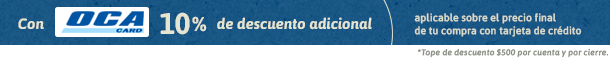
<style>
.page{position:relative;width:610px;height:60px;background:#ffffff}
.page>*{position:absolute;margin:0}
.t1{font:30px "Asap-Bold";letter-spacing:-0.03em;color:#dedec8}
.t2{font:30px "Asap-Bold";letter-spacing:0.02em;color:#dedec8}
.t3{font:20px "Asap-Bold";letter-spacing:-0.03em;color:#dedec8}
.t4{font:15px "Asap-BoldItalic";color:#dedec8}
.t5{font:10px/13px "Asap-Regular";color:#dedec8;font-weight:bold}
.t6{font:8px "Asap-Italic";letter-spacing:0.01em;color:#868b80;font-weight:bold}
</style>
<div class="page">
<p class="t1" style="left:160px;top:12px;width:47px;height:23px">1<span class="t2">0</span><span class="t3">%</span></p>
<p class="t4" style="left:217px;top:17px;width:155px;height:13px">de descuento adicional</p>
<p class="t5" style="left:414px;top:13px;width:168px;height:24px;opacity:0.91">aplicable sobre el precio final<br>de tu compra con tarjeta de crédito</p>
<p class="t4" style="left:18px;top:18px;width:26px;height:11px">Con</p>
<p class="t6" style="left:417px;top:48px;width:192px;height:10px">*Tope de descuento $500 por cuenta y por cierre.</p>
</div>
